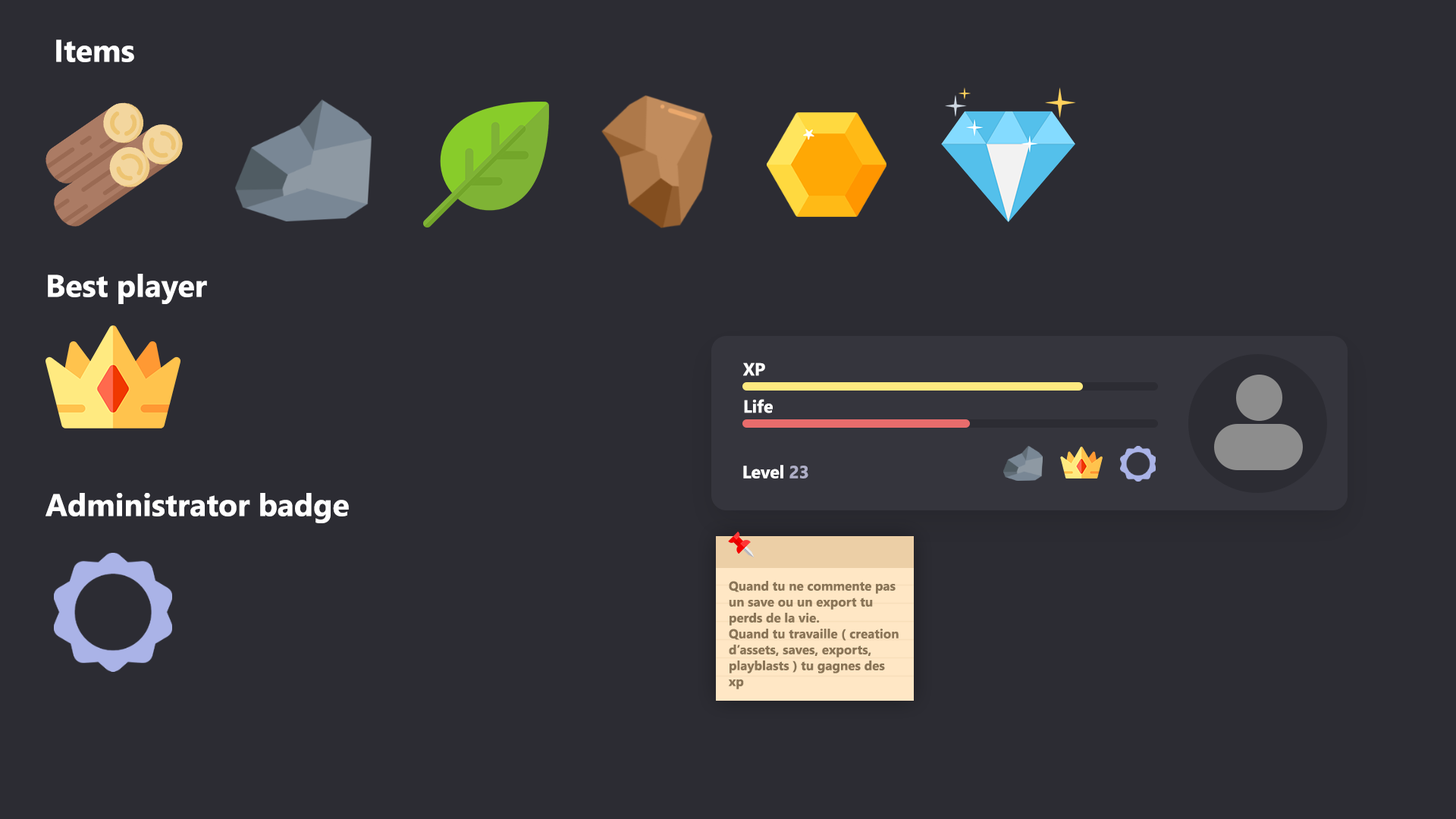
<style>
.page{position:relative;width:1456px;height:819px;background:#2c2c33}
.page>*{position:absolute;margin:0}
.t1{font:31.1px "LeelawadeeUI-Bold";color:#ffffff}
.t2{font:17.4px "LeelawadeeUI-Bold";color:#ffffff}
.t3{font:17.4px "LeelawadeeUI-Bold";color:#aeaec6}
.t4{font:12.9px/15.9px "LeelawadeeUI-Bold";color:#8a7557}
</style>
<div class="page">
<p class="t1" style="left:56px;top:39px;width:78px;height:23px">Items</p>
<p class="t1" style="left:48px;top:274px;width:159px;height:30px">Best player</p>
<p class="t2" style="left:743px;top:362px;width:22px;height:14px">XP</p>
<p class="t2" style="left:744px;top:399px;width:29px;height:14px">Life</p>
<p class="t2" style="left:743px;top:465px;width:65px;height:14px">Level <span class="t3">23</span></p>
<p class="t1" style="left:45px;top:493px;width:304px;height:30px">Administrator badge</p>
<p class="t4" style="left:728px;top:581px;width:171px;height:108px">Quand tu ne commente pas un save ou un export tu perds de la vie.<br>Quand tu travaille ( creation d’assets, saves, exports, playblasts ) tu gagnes des xp</p>
</div>
